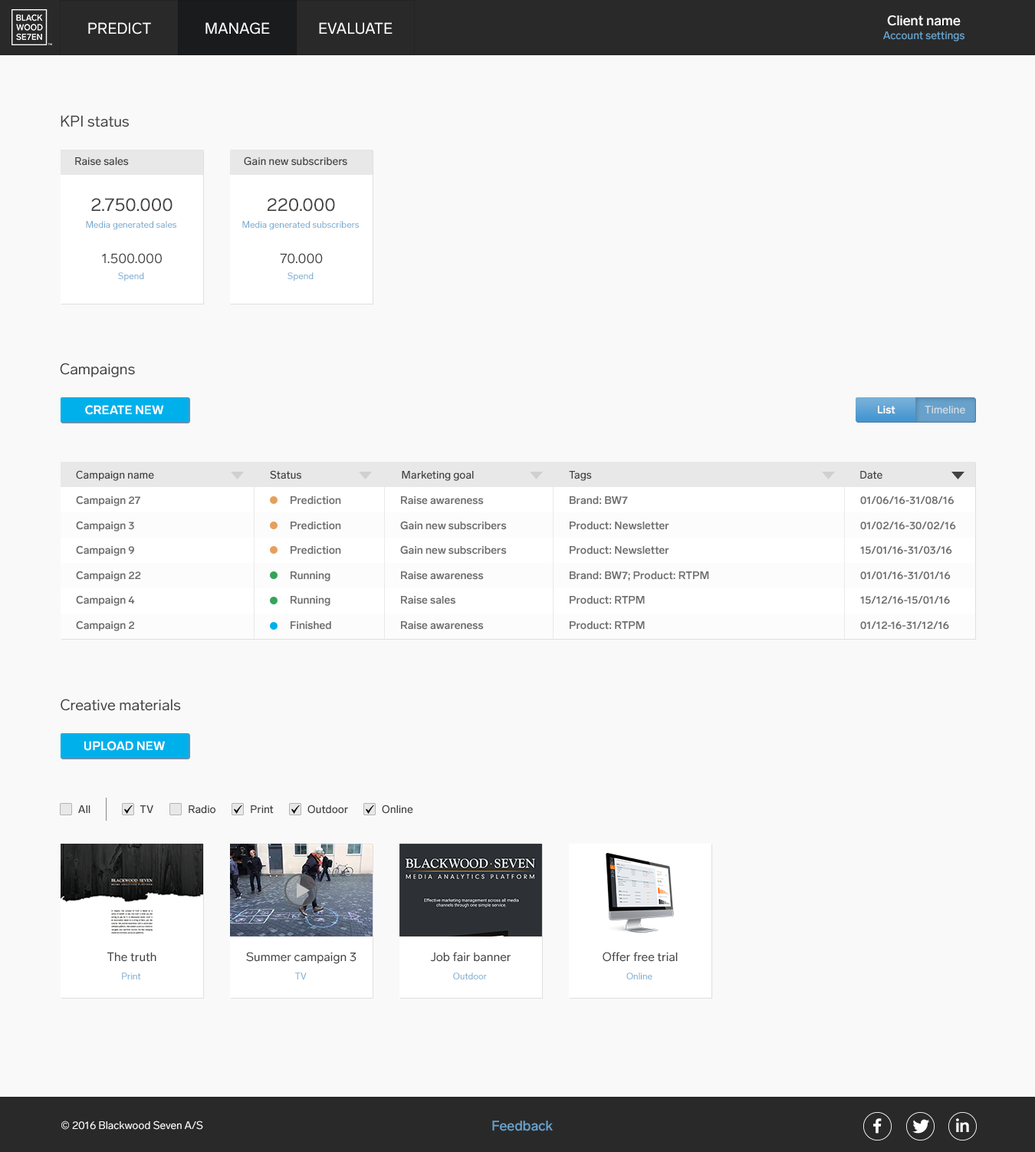
<style>
.page{position:relative;width:1035px;height:1152px;background:#f9f9f9}
.page>*{position:absolute;margin:0}
.t1{font:13.8px "LabGrotesque-Medium";color:#ffffff}
.t2{font:15.3px "LabGrotesque-Regular";color:#ffffff}
.t3{font:10.7px "LabGrotesque-Medium";color:#68a2cc}
.t4{font:15.3px "LabGrotesque-Regular";color:#434242}
.t5{font:10.7px "LabGrotesque-Medium";color:#434242}
.t6{font:18.4px "LabGrotesque-Regular";color:#434242}
.t7{font:9.2px "LabGrotesque-Regular";color:#68a2cc}
.t8{font:13.8px "LabGrotesque-Regular";color:#434242}
.t9{font:12.3px "LabGrotesque-Bold";color:#ffffff}
.t10{font:10.7px "LabGrotesque-Bold";color:#ffffff}
.t11{font:10.7px "LabGrotesque-Medium";color:#e7e6e6}
.t12{font:10.7px/25px "LabGrotesque-Bold";color:#6e6e6e}
.t13{font:12.3px "LabGrotesque-Regular";color:#434242}
.t14{font:9.2px "LabGrotesque-Regular"}
.t15{font:10.7px "LabGrotesque-Regular";color:#ffffff}
.t16{font:13.8px "LabGrotesque-Medium";color:#68a2cc}
</style>
<div class="page">
<p class="t1" style="left:887px;top:15px;width:74px;height:11px">Client name</p>
<p class="t2" style="left:88px;top:22px;width:63px;height:13px">PREDICT</p>
<p class="t2" style="left:206px;top:22px;width:64px;height:13px">MANAGE</p>
<p class="t2" style="left:319px;top:22px;width:74px;height:13px">EVALUATE</p>
<p class="t3" style="left:883px;top:31px;width:82px;height:10px">Account settings</p>
<p class="t4" style="left:61px;top:115px;width:68px;height:12px">KPI status</p>
<p class="t5" style="left:75px;top:157px;width:54px;height:9px">Raise sales</p>
<p class="t5" style="left:244px;top:156px;width:103px;height:10px">Gain new subscribers</p>
<p class="t6" style="left:91px;top:198px;width:82px;height:14px">2.750.000</p>
<p class="t6" style="left:268px;top:198px;width:67px;height:14px">220.000</p>
<p class="t7" style="left:86px;top:221px;width:90px;height:9px">Media generated sales</p>
<p class="t7" style="left:242px;top:221px;width:117px;height:9px">Media generated subscribers</p>
<p class="t8" style="left:102px;top:253px;width:60px;height:11px">1.500.000</p>
<p class="t8" style="left:280px;top:253px;width:43px;height:11px">70.000</p>
<p class="t7" style="left:118px;top:272px;width:26px;height:9px">Spend</p>
<p class="t7" style="left:288px;top:272px;width:26px;height:9px">Spend</p>
<p class="t4" style="left:60px;top:363px;width:75px;height:14px">Campaigns</p>
<p class="t9" style="left:85px;top:405px;width:79px;height:10px">CREATE NEW</p>
<p class="t10" style="left:878px;top:406px;width:18px;height:8px">List</p>
<p class="t11" style="left:925px;top:406px;width:40px;height:8px;opacity:0.82">Timeline</p>
<p class="t5" style="left:76px;top:470px;width:78px;height:11px">Campaign name</p>
<p class="t5" style="left:270px;top:470px;width:31px;height:9px">Status</p>
<p class="t5" style="left:402px;top:471px;width:72px;height:10px">Marketing goal</p>
<p class="t5" style="left:569px;top:471px;width:23px;height:10px">Tags</p>
<p class="t5" style="left:860px;top:471px;width:23px;height:8px">Date</p>
<p class="t12" style="left:76px;top:495px;width:65px;height:136px">Campaign 27<br>Campaign 3<br>Campaign 9<br>Campaign 22<br>Campaign 4<br>Campaign 2</p>
<p class="t12" style="left:291px;top:496px;width:50px;height:134px">Prediction<br>Prediction<br>Prediction<br>Running<br>Running<br>Finished</p>
<p class="t12" style="left:400px;top:496px;width:107px;height:134px">Raise awareness<br>Gain new subscribers<br>Gain new subscribers<br>Raise awareness<br>Raise sales<br>Raise awareness</p>
<p class="t12" style="left:570px;top:496px;width:139px;height:134px">Brand: BW7<br>Product: Newsletter<br>Product: Newsletter<br>Brand: BW7; Product: RTPM<br>Product: RTPM<br>Product: RTPM</p>
<p class="t12" style="left:860px;top:496px;width:96px;height:134px">01/06/16-31/08/16<br>01/02/16-30/02/16<br>15/01/16-31/03/16<br>01/01/16-31/01/16<br>15/12/16-15/01/16<br>01/12-16-31/12/16</p>
<p class="t4" style="left:61px;top:699px;width:120px;height:12px">Creative materials</p>
<p class="t9" style="left:84px;top:741px;width:81px;height:10px">UPLOAD NEW</p>
<p class="t5" style="left:78px;top:805px;width:12px;height:8px">All</p>
<p class="t5" style="left:140px;top:805px;width:13px;height:8px">TV</p>
<p class="t5" style="left:189px;top:805px;width:26px;height:9px">Radio</p>
<p class="t5" style="left:251px;top:805px;width:23px;height:9px">Print</p>
<p class="t5" style="left:308px;top:804px;width:40px;height:10px">Outdoor</p>
<p class="t5" style="left:382px;top:804px;width:31px;height:10px">Online</p>
<p class="t13" style="left:107px;top:952px;width:49px;height:10px">The truth</p>
<p class="t13" style="left:246px;top:952px;width:111px;height:12px">Summer campaign 3</p>
<p class="t13" style="left:430px;top:952px;width:81px;height:10px">Job fair banner</p>
<p class="t13" style="left:603px;top:952px;width:75px;height:10px">Offer free trial</p>
<p class="t7" style="left:122px;top:972px;width:19px;height:7px">Print</p>
<p class="t7" style="left:295px;top:972px;width:12px;height:7px">TV</p>
<p class="t14" style="left:453px;top:972px;width:34px;height:7px">Outdoor</p>
<p class="t7" style="left:627px;top:972px;width:26px;height:7px">Online</p>
<p class="t15" style="left:61px;top:1120px;width:142px;height:10px">© 2016 Blackwood Seven A/S</p>
<p class="t16" style="left:492px;top:1120px;width:61px;height:11px">Feedback</p>
</div>
